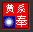
<style>
.page{position:relative;width:33px;height:32px;background:#f20000}
.page>*{position:absolute;margin:0}
.t1{font:10.4px "SimSun";color:#ffffff}
.t2{font:11.7px "SimSun";color:#ffffff}
</style>
<div class="page">
<p class="t1" style="left:6px;top:4px;width:19px;height:9px">黄系</p>
<p class="t2" style="left:16px;top:15px;width:11px;height:12px">奉</p>
</div>
